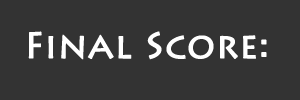
<style>
.page{position:relative;width:300px;height:100px;background:#333333}
.page>*{position:absolute;margin:0}
.t1{font:36px "LithosPro-Regular";color:#ffffff;font-weight:bold}
</style>
<div class="page">
<p class="t1" style="left:28px;top:31px;width:239px;height:29px">Final Score:</p>
</div>
